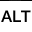
<style>
.page{position:relative;width:32px;height:32px;background:#ffffff}
.page>*{position:absolute;margin:0}
.t1{font:16.1px "HelveticaNeueLTPro-Md"}
</style>
<div class="page">
<p class="t1" style="left:1px;top:9px;width:30px;height:12px">ALT</p>
</div>
